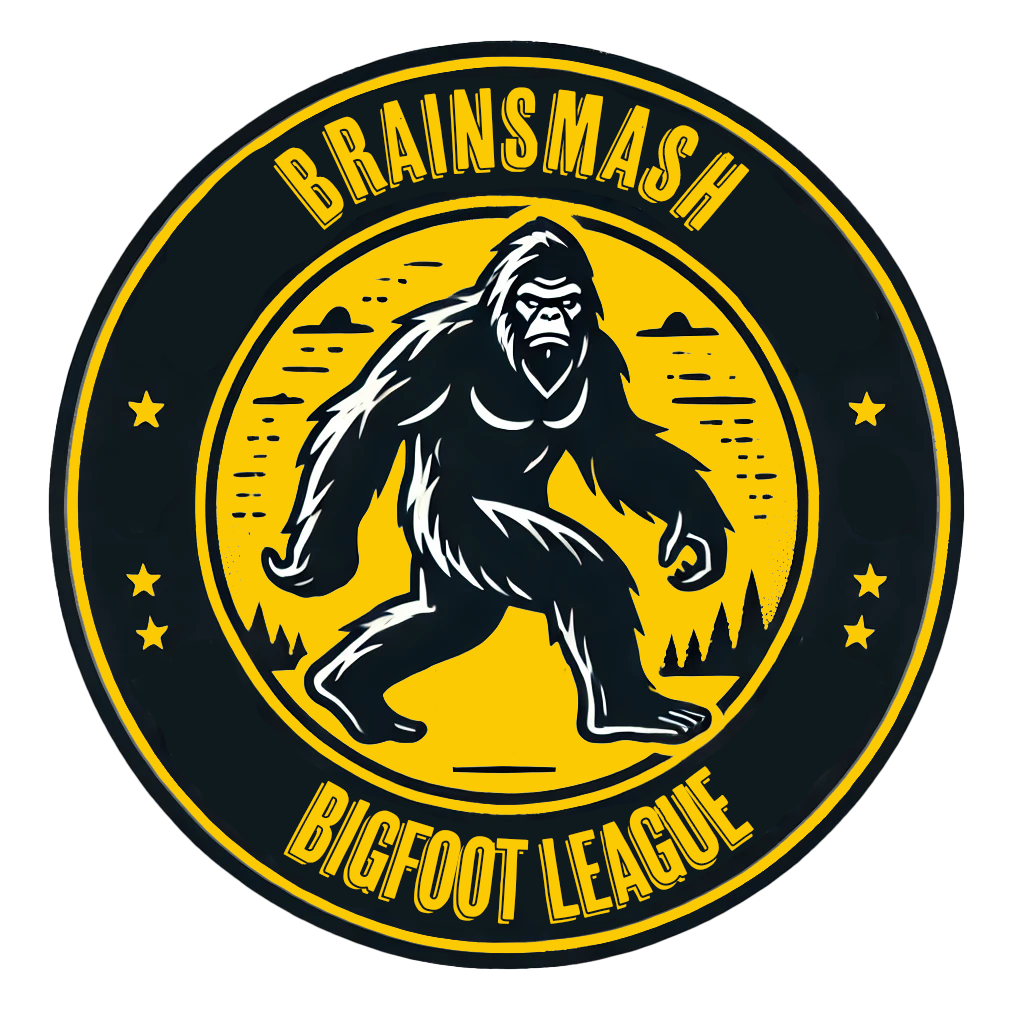
<style>
.page{position:relative;width:1024px;height:1024px;background:#ffffff}
.page>*{position:absolute;margin:0}
.t1{font:113.4px "CheapPine";color:#fcca02}
</style>
<div class="page">
<p class="t1" style="left:273px;top:87px;width:476px;height:144px">BRAINSMASH</p>
<p class="t1" style="left:283px;top:766px;width:471px;height:158px">bigfoot league</p>
</div>
